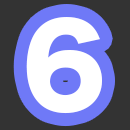
<style>
.page{position:relative;width:130px;height:130px;background:#333333}
.page>*{position:absolute;margin:0}
.t1{font:110.5px "HiraKakuStdN-W8";color:#ffffff}
</style>
<div class="page">
<p class="t1" style="left:26px;top:17px;width:76px;height:97px">６</p>
</div>
